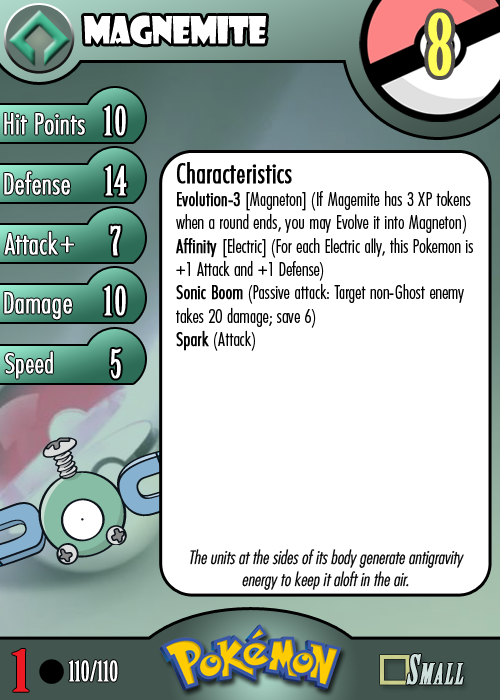
<style>
.page{position:relative;width:500px;height:700px;background:#ffffff}
.page>*{position:absolute;margin:0}
.t1{font:36.7px "ShowcardGothic-Reg";letter-spacing:-0.025em;color:#ffffff;scale:0.91 1}
.t2{font:83.3px "BirchStd";letter-spacing:0.025em;color:#fffd59;font-weight:bold}
.t3{font:27.8px "Futura-CondensedLight";color:#ffffff;font-weight:bold}
.t4{font:38.9px "BirchStd";letter-spacing:0.035em;color:#ffffff;font-weight:bold}
.t5{font:19.4px "FuturaCondensedBQ-Light";color:#010101}
.t6{font:27.8px "FuturaCondensedBQ-Light";color:#010101;font-weight:bold}
.t7{font:19.4px "FuturaCondensedBQ-Light";color:#010101;font-weight:bold}
.t8{font:30.6px "Futura-CondensedLight";color:#ffffff;font-weight:bold}
.t9{font:27.8px "FuturaCondensedBQ-Light";color:#ffffff;font-weight:bold}
.t10{font:18.1px "Futura-CondensedLight";color:#010101;font-style:italic}
.t11{font:55.6px "BirchStd";color:#ed1c24;font-weight:bold;scale:1.5 1}
.t12{font:27.8px "BirchStd";color:#ffffff;font-weight:bold}
</style>
<div class="page">
<p class="t1" style="left:84px;top:15px;width:182px;height:30px">magnemite</p>
<p class="t2" style="left:428px;top:12px;width:24px;height:64px">8</p>
<p class="t3" style="left:4px;top:113px;width:81px;height:22px">Hit Points</p>
<p class="t4" style="left:104px;top:105px;width:22px;height:31px">10</p>
<p class="t3" style="left:4px;top:171px;width:66px;height:24px">Defense</p>
<p class="t4" style="left:105px;top:165px;width:22px;height:31px">14</p>
<p class="t5" style="left:176px;top:162px;width:297px;height:189px"><span class="t6">Characteristics<br></span><span class="t7">Evolution-3 </span>[Magneton] (If Magemite has 3 XP tokens when a round ends, you may Evolve it into Magneton)<br><span class="t7">Affinity </span>[Electric] (For each Electric ally, this Pokemon is +1 Attack and +1 Defense)<br><span class="t7">Sonic Boom</span> (Passive attack: Target non-Ghost enemy takes 20 damage; save 6)<br><span class="t7">Spark </span>(Attack)</p>
<p class="t3" style="left:4px;top:231px;width:54px;height:24px">Attack</p>
<p class="t4" style="left:110px;top:225px;width:11px;height:31px">7</p>
<p class="t8" style="left:60px;top:236px;width:14px;height:17px">+</p>
<p class="t3" style="left:4px;top:292px;width:68px;height:28px">Damage</p>
<p class="t4" style="left:104px;top:285px;width:22px;height:31px">10</p>
<p class="t9" style="left:5px;top:351px;width:48px;height:28px">Speed</p>
<p class="t4" style="left:111px;top:348px;width:10px;height:31px">5</p>
<p class="t10" style="left:190px;top:549px;width:274px;height:41px;text-align:center">The units at the sides of its body generate antigravity energy to keep it aloft in the air.</p>
<p class="t11" style="left:12px;top:649px;width:17px;height:43px">1</p>
<p class="t12" style="left:68px;top:660px;width:50px;height:22px">110/110</p>
</div>
